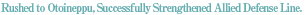
<style>
.page{position:relative;width:305px;height:15px;background:#ffffff}
.page>*{position:absolute;margin:0}
.t1{font:12px "RyuminPro-ExBold";letter-spacing:-0.08em;color:#67afb2;scale:0.9 1}
</style>
<div class="page">
<p class="t1" style="left:1px;top:2px;width:301px;height:12px">Rushed to Otoineppu, Successfully Strengthened Allied Defense Line.</p>
</div>
